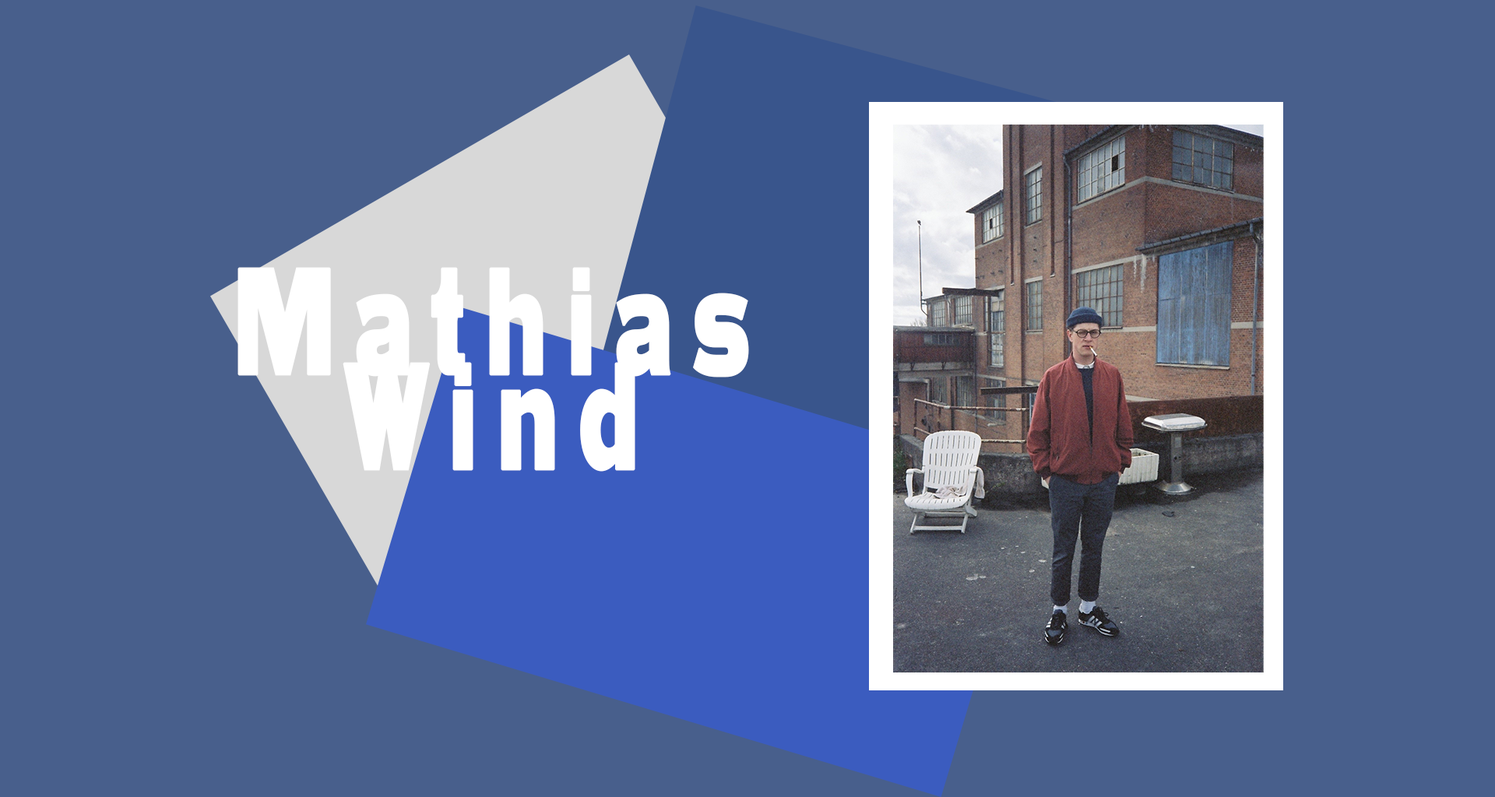
<style>
.page{position:relative;width:1495px;height:797px;background:#485f8c}
.page>*{position:absolute;margin:0}
.t1{font:158.4px "HWTUnitGothic-717";letter-spacing:0.2em;color:#ffffff;font-weight:bold;scale:0.5 1}
</style>
<div class="page">
<p class="t1" style="left:238px;top:267px;width:511px;height:205px;text-align:center">Mathias<br>Wind</p>
</div>
